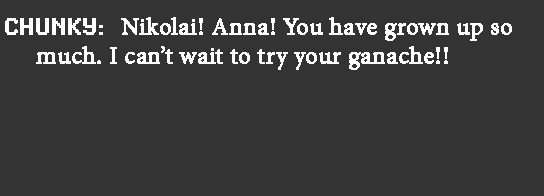
<style>
.page{position:relative;width:544px;height:196px;background:#333333}
.page>*{position:absolute;margin:0}
.t1{font:24px "MinionPro-Regular";color:#ffffff;font-weight:bold}
.t2{font:24px "SynchroLET";color:#ffffff;font-weight:bold}
</style>
<div class="page">
<p class="t1" style="left:5px;top:17px;width:507px;height:53px"><span class="t2">CHUNKY:  </span>Nikolai! Anna! You have grown up so<br>     much. I can’t wait to try your ganache!!</p>
</div>
